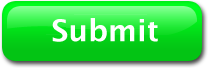
<style>
.page{position:relative;width:208px;height:68px}
.page>*{position:absolute;margin:0}
.t1{font:30px "LucidaGrande-Bold";color:#ffffff}
</style>
<div class="page">
<p class="t1" style="left:52px;top:18px;width:106px;height:24px">Submit</p>
</div>
